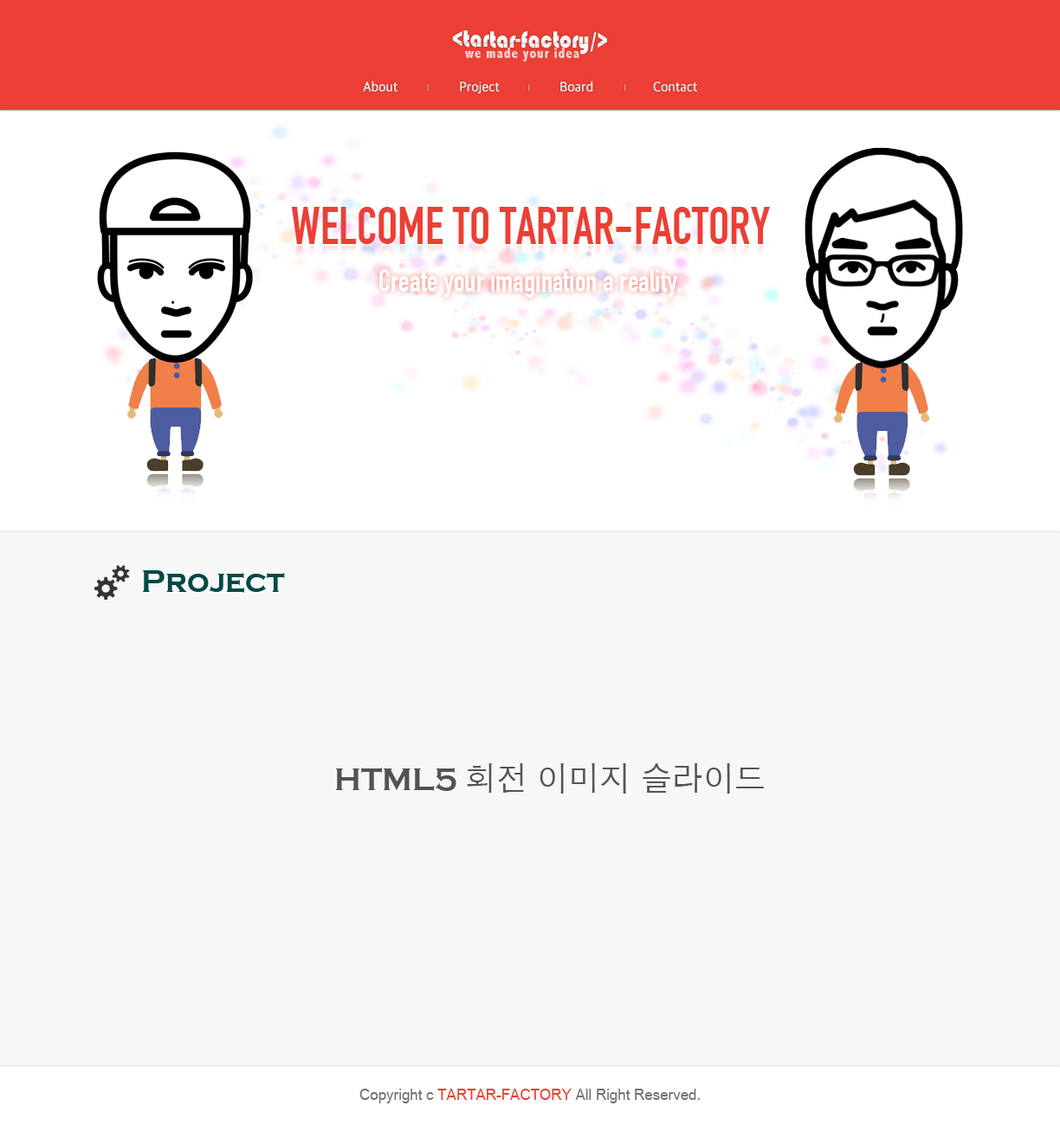
<style>
.page{position:relative;width:1060px;height:1125px;background:#f6f8f8}
.page>*{position:absolute;margin:0}
.t1{font:24.2px "Bauhaus93";color:#ffffff;scale:0.88 1}
.t2{font:14.7px "AbadiMT-CondensedExtraBold";letter-spacing:0.05em;color:#eeeeee;scale:0.95 1}
.t3{font:13.9px "AppleSDGothicNeo-Regular";letter-spacing:-0.01em;color:#ededed;font-weight:bold;scale:0.95 1}
.t4{font:51.9px "DINCondensed-Bold";color:#ec3f35;scale:0.95 1}
.t5{font:31.2px "DINCondensed-Bold";color:#ffffff;scale:0.95 1}
.t6{font:32.9px "CopperplateGothic-Bold";color:#004949;scale:0.95 1}
.t7{font:32.9px "AppleGothic";color:#535353;scale:0.95 1}
.t8{font:32.9px "CopperplateGothic-Bold";color:#535353;scale:0.95 1}
.t9{font:15.6px "ArialUnicodeMS";letter-spacing:-0.005em;color:#727272;scale:0.95 1}
.t10{font:15.6px "ArialUnicodeMS";letter-spacing:-0.005em;color:#ec3f35;scale:0.95 1}
</style>
<div class="page">
<p class="t1" style="left:452px;top:30px;width:155px;height:25px;rotate:1deg">&lt;tartar-factory/&gt;</p>
<p class="t2" style="left:465px;top:48px;width:114px;height:13px;opacity:0.87">we made your idea</p>
<p class="t3" style="left:363px;top:81px;width:34px;height:11px">About</p>
<p class="t3" style="left:460px;top:81px;width:39px;height:12px">Project</p>
<p class="t3" style="left:560px;top:81px;width:33px;height:11px">Board</p>
<p class="t3" style="left:653px;top:81px;width:44px;height:11px">Contact</p>
<p class="t4" style="left:291px;top:207px;width:479px;height:37px">WELCOME TO TARTAR-FACTORY</p>
<p class="t5" style="left:379px;top:269px;width:302px;height:29px">Create your imagination a reality.</p>
<p class="t6" style="left:143px;top:570px;width:142px;height:23px">Project</p>
<p class="t7" style="left:336px;top:764px;width:428px;height:30px"><span class="t8">HTML5 </span>회전 이미지 슬라이드</p>
<p class="t9" style="left:359px;top:1089px;width:340px;height:15px">Copyright c <span class="t10">TARTAR-FACTORY </span>All Right Reserved.</p>
</div>
